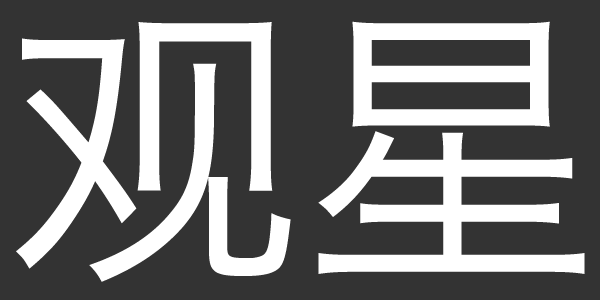
<style>
.page{position:relative;width:600px;height:300px;background:#333333}
.page>*{position:absolute;margin:0}
.t1{font:300px "HiraginoSansGB-W3";color:#ffffff}
</style>
<div class="page">
<p class="t1" style="left:16px;top:21px;width:569px;height:261px">观星</p>
</div>
